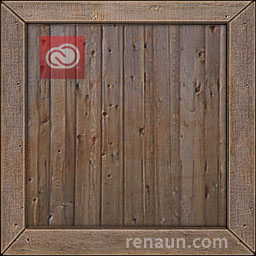
<style>
.page{position:relative;width:256px;height:256px}
.page>*{position:absolute;margin:0}
.t1{font:20px "SourceSansPro-Semibold";color:#aea299}
</style>
<div class="page">
<p class="t1" style="left:126px;top:238px;width:102px;height:10px">renaun.com</p>
</div>
